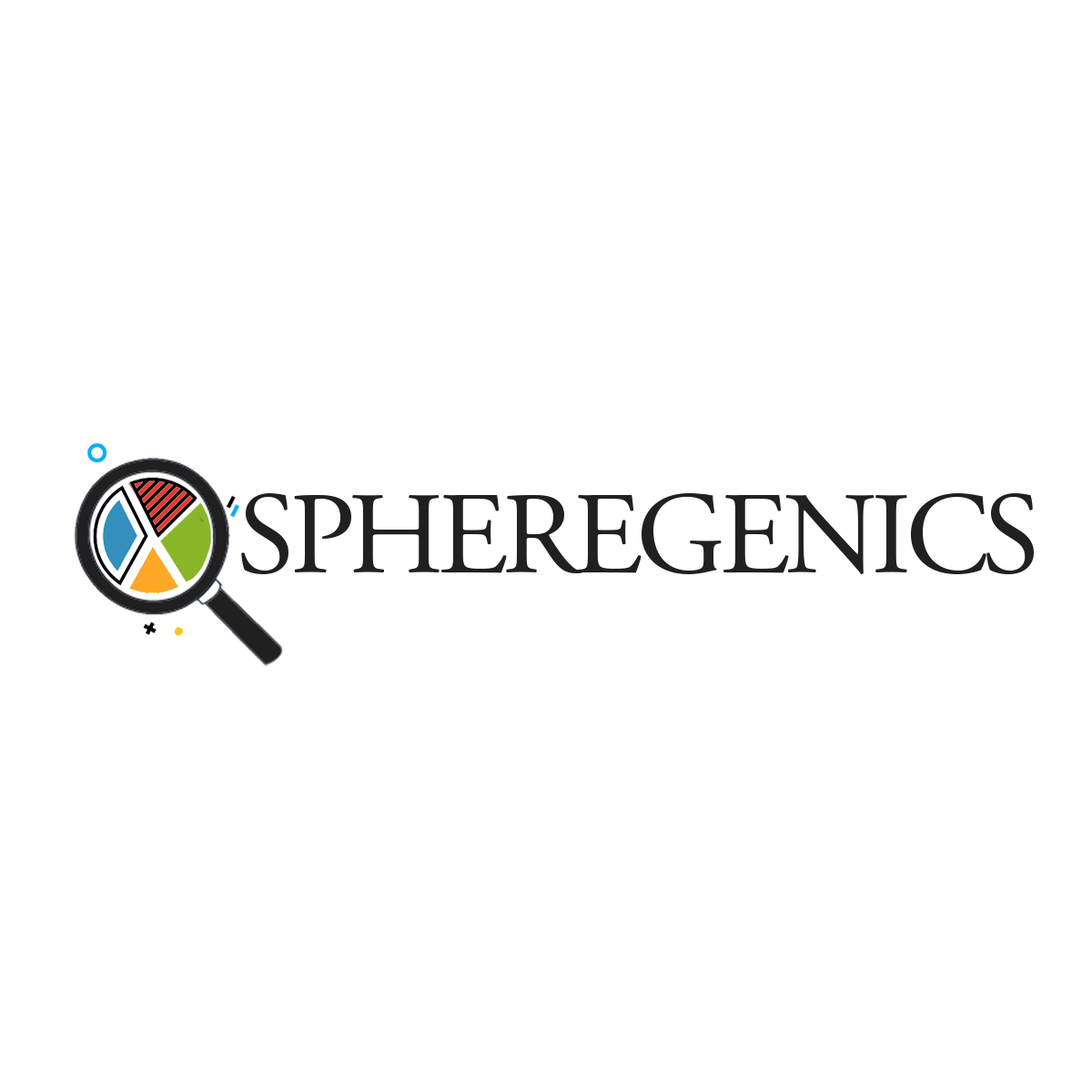
<style>
.page{position:relative;width:1092px;height:1092px;background:#ffffff}
.page>*{position:absolute;margin:0}
.t1{font:117.7px "AGaramondPro-Regular";letter-spacing:-0.05em;color:#202020}
</style>
<div class="page">
<p class="t1" style="left:241px;top:492px;width:793px;height:82px">SPHEREGENICS</p>
</div>
